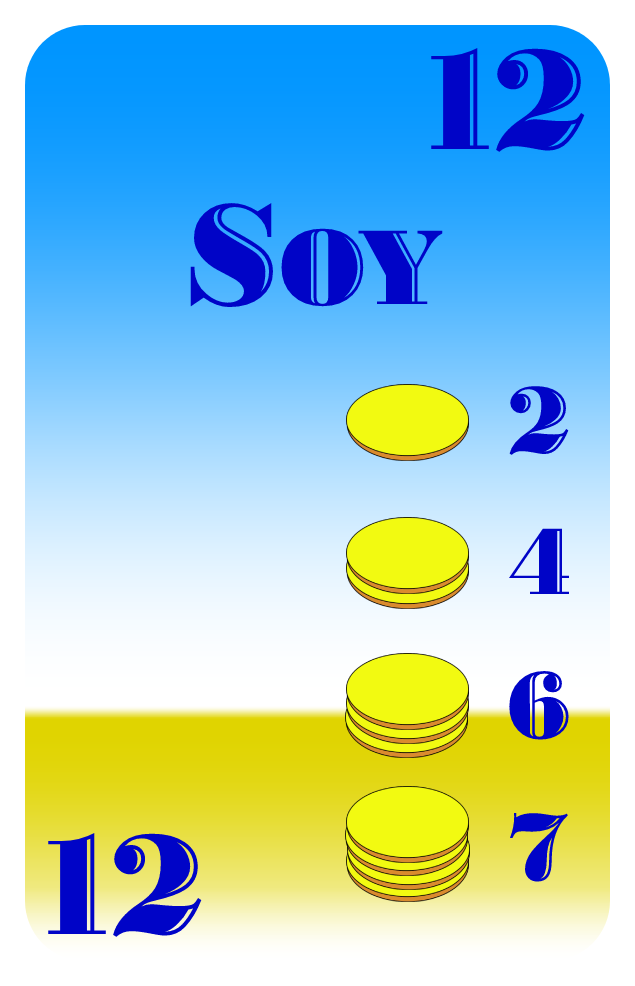
<style>
.page{position:relative;width:635px;height:986px}
.page>*{position:absolute;margin:0}
.t1{font:150px "BodoniHighlightICG";color:#0004c7}
.t2{font:112px "BodoniHighlightICG";color:#0004c7}
.t3{font:100px "BodoniHighlightICG";color:#0004c7}
</style>
<div class="page">
<p class="t1" style="left:431px;top:48px;width:154px;height:104px">12</p>
<p class="t2" style="left:190px;top:203px;width:253px;height:105px"><span class="t1">S</span>OY</p>
<p class="t3" style="left:509px;top:386px;width:60px;height:69px">2</p>
<p class="t3" style="left:508px;top:528px;width:61px;height:66px">4</p>
<p class="t3" style="left:509px;top:671px;width:60px;height:69px">6</p>
<p class="t3" style="left:510px;top:813px;width:58px;height:69px">7</p>
<p class="t1" style="left:48px;top:833px;width:154px;height:104px">12</p>
</div>
